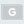
<style>
.page{position:relative;width:24px;height:24px;background:#e6ecee}
.page>*{position:absolute;margin:0}
.t1{font:11px "VAGRoundedBT-Regular";letter-spacing:-0.04em;color:#ffffff}
</style>
<div class="page">
<p class="t1" style="left:8px;top:8px;width:8px;height:8px;opacity:0.9">G</p>
</div>
